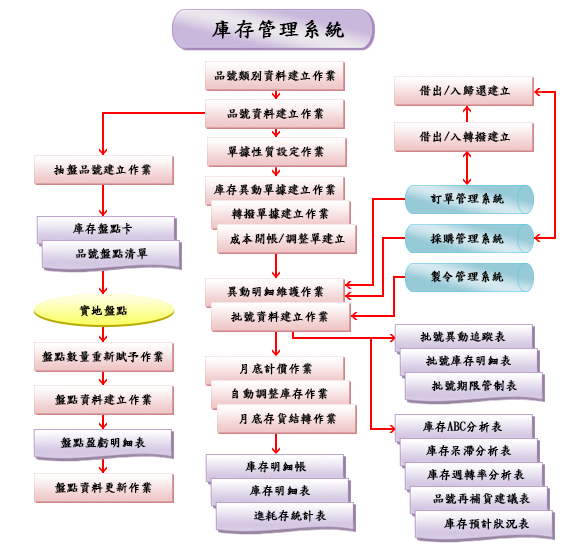
<style>
.page{position:relative;width:577px;height:545px;background:#ffffff}
.page>*{position:absolute;margin:0}
.t1{font:20px "DFKaiShu-SB-Estd-BF";color:#000000;font-weight:bold;scale:1.08 1}
.t2{font:12px "DFKaiShu-SB-Estd-BF";color:#000000;font-weight:bold}
</style>
<div class="page">
<p class="t1" style="left:212px;top:20px;width:133px;height:19px">庫存管理系統</p>
<p class="t2" style="left:214px;top:69px;width:122px;height:13px">品號類別資料建立作業</p>
<p class="t2" style="left:419px;top:85px;width:91px;height:12px">借出/入歸還建立</p>
<p class="t2" style="left:227px;top:107px;width:97px;height:13px">品號資料建立作業</p>
<p class="t2" style="left:419px;top:131px;width:91px;height:12px">借出/入轉撥建立</p>
<p class="t2" style="left:227px;top:145px;width:97px;height:13px">單據性質設定作業</p>
<p class="t2" style="left:53px;top:164px;width:98px;height:12px">抽盤品號建立作業</p>
<p class="t2" style="left:213px;top:183px;width:123px;height:13px">庫存異動單據建立作業</p>
<p class="t2" style="left:430px;top:192px;width:74px;height:13px">訂單管理系統</p>
<p class="t2" style="left:231px;top:207px;width:98px;height:13px">轉撥單據建立作業</p>
<p class="t2" style="left:72px;top:223px;width:60px;height:12px">庫存盤點卡</p>
<p class="t2" style="left:230px;top:232px;width:115px;height:13px">成本開帳/調整單建立</p>
<p class="t2" style="left:430px;top:232px;width:74px;height:13px">採購管理系統</p>
<p class="t2" style="left:75px;top:247px;width:73px;height:13px">品號盤點清單</p>
<p class="t2" style="left:430px;top:270px;width:74px;height:13px">製令管理系統</p>
<p class="t2" style="left:227px;top:286px;width:97px;height:12px">異動明細維護作業</p>
<p class="t2" style="left:79px;top:304px;width:48px;height:13px">實地盤點</p>
<p class="t2" style="left:231px;top:310px;width:97px;height:13px">批號資料建立作業</p>
<p class="t2" style="left:420px;top:331px;width:86px;height:12px">批號異動追蹤表</p>
<p class="t2" style="left:41px;top:351px;width:123px;height:12px">盤點數量重新賦予作業</p>
<p class="t2" style="left:240px;top:363px;width:72px;height:12px">月底計價作業</p>
<p class="t2" style="left:426px;top:355px;width:86px;height:12px">批號庫存明細表</p>
<p class="t2" style="left:232px;top:388px;width:96px;height:12px">自動調整庫存作業</p>
<p class="t2" style="left:431px;top:379px;width:86px;height:13px">批號期限管制表</p>
<p class="t2" style="left:54px;top:393px;width:98px;height:13px">盤點資料建立作業</p>
<p class="t2" style="left:239px;top:412px;width:97px;height:13px">月底存貨結轉作業</p>
<p class="t2" style="left:422px;top:421px;width:81px;height:12px">庫存ABC分析表</p>
<p class="t2" style="left:60px;top:437px;width:86px;height:12px">盤點盈虧明細表</p>
<p class="t2" style="left:426px;top:445px;width:86px;height:12px">庫存呆滯分析表</p>
<p class="t2" style="left:245px;top:461px;width:62px;height:12px">庫存明細帳</p>
<p class="t2" style="left:427px;top:469px;width:98px;height:12px">庫存週轉率分析表</p>
<p class="t2" style="left:54px;top:481px;width:98px;height:13px">盤點資料更新作業</p>
<p class="t2" style="left:249px;top:485px;width:62px;height:12px">庫存明細表</p>
<p class="t2" style="left:433px;top:492px;width:97px;height:13px">品號再補貨建議表</p>
<p class="t2" style="left:253px;top:510px;width:74px;height:12px">進耗存統計表</p>
<p class="t2" style="left:444px;top:518px;width:86px;height:12px">庫存預計狀況表</p>
</div>
